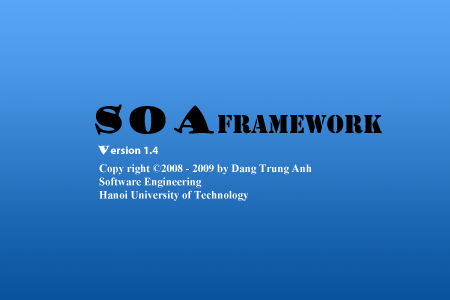
<style>
.page{position:relative;width:450px;height:300px}
.page>*{position:absolute;margin:0}
.t1{font:24px "StencilStd";color:#000000}
.t2{font:36px "GoudyStout";color:#000000}
.t3{font:11px "MyriadPro-Bold";color:#fefdfd}
.t4{font:11px "GoudyStout";color:#fefdfd}
.t5{font:11px "TimesNewRomanPS-BoldMT";color:#ffffff}
</style>
<div class="page">
<p class="t1" style="left:95px;top:104px;width:287px;height:31px"><span class="t2">SOA</span>Framework</p>
<p class="t3" style="left:98px;top:145px;width:60px;height:10px"><span class="t4">V</span>ersion 1.4</p>
<p class="t5" style="left:99px;top:164px;width:213px;height:37px">Copy right ©2008 - 2009 by Dang Trung Anh <br>Software Engineering<br>Hanoi University of Technology</p>
</div>
